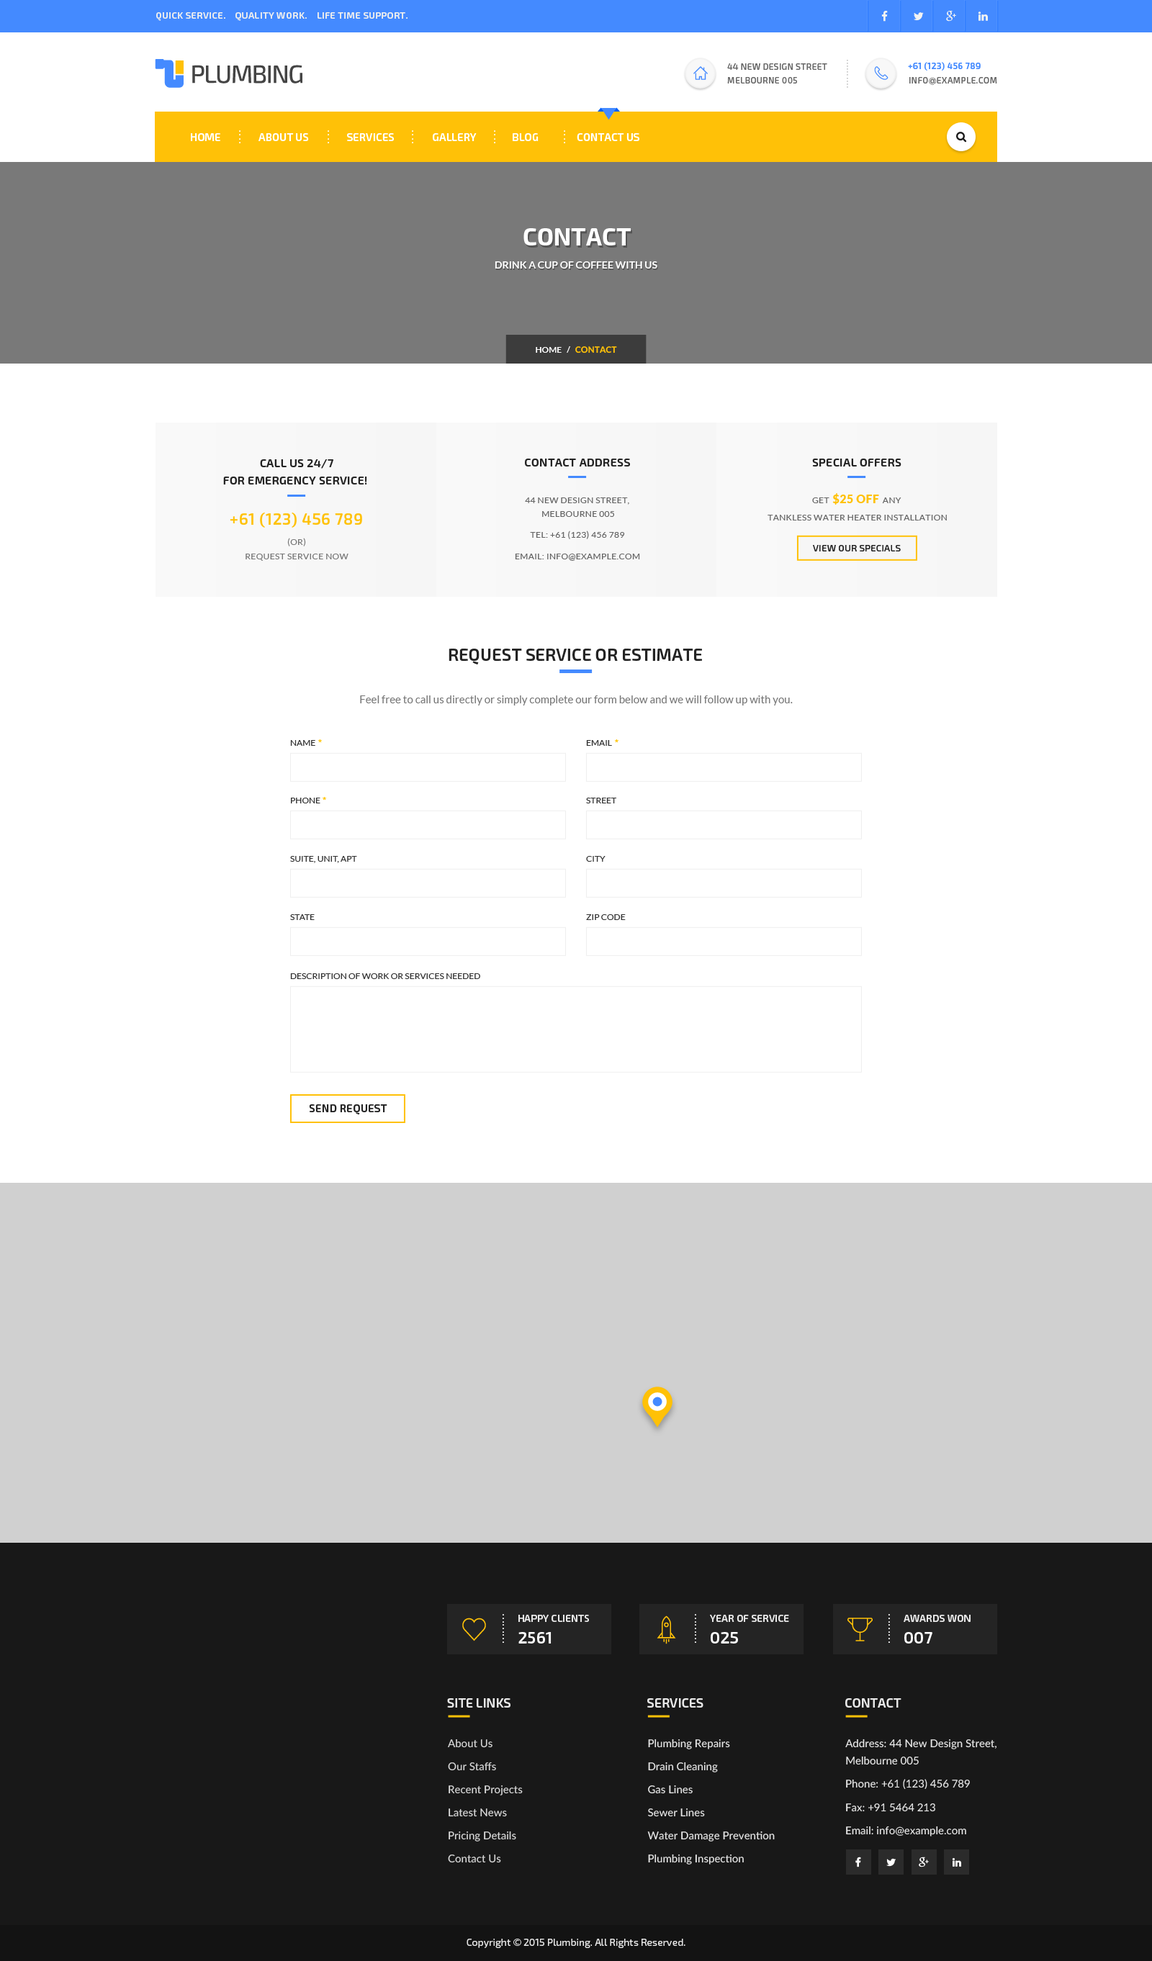
<style>
.page{position:relative;width:1152px;height:1961px;background:#ffffff}
.page>*{position:absolute;margin:0}
.t1{font:9.4px "Exo2.0-SemiBold";letter-spacing:0.03em;color:#eeeeee;text-transform:uppercase}
.t2{font:8.6px/13.7px "Exo2.0-Medium";letter-spacing:0.03em;color:#666666;text-transform:uppercase}
.t3{font:8.6px "Exo2.0-SemiBold";letter-spacing:0.1em;color:#cccccc;text-transform:uppercase}
.t4{font:8.6px "Exo2.0-SemiBold";letter-spacing:0.03em;color:#448aff;text-transform:uppercase}
.t5{font:8.6px "Exo2.0-Medium";letter-spacing:0.03em;color:#666666;text-transform:uppercase}
.t6{font:8.6px "Montserrat-Regular";letter-spacing:0.03em;color:#666666;text-transform:uppercase}
.t7{font:10.8px "Exo2.0-SemiBold";color:#ffffff;text-transform:uppercase}
.t8{font:8.6px "Exo2.0-SemiBold";letter-spacing:0.2em;color:#ffffff;text-transform:uppercase}
.t9{font:24.5px "Exo2.0-Bold";color:#ffffff;text-transform:uppercase}
.t10{font:10.1px "Lato-Bold";color:#ffffff;text-transform:uppercase}
.t11{font:8.6px "Lato-Bold";color:#ffffff;text-transform:uppercase}
.t12{font:8.6px "Lato-Heavy";color:#ffc107;text-transform:uppercase}
.t13{font:11.5px/17.3px "Exo2.0-SemiBold";letter-spacing:0.02em;color:#232323;text-transform:uppercase}
.t14{font:11.5px "Exo2.0-SemiBold";letter-spacing:0.02em;color:#232323;text-transform:uppercase}
.t15{font:8.6px/13.7px "Lato-Regular";letter-spacing:0.03em;color:#666666;text-transform:uppercase}
.t16{font:8.6px/17.3px "Lato-Regular";letter-spacing:0.03em;color:#666666;text-transform:uppercase}
.t17{font:11.5px/17.3px "Lato-Black";letter-spacing:0.03em;color:#ffc107;text-transform:uppercase}
.t18{font:15.8px "Exo2.0-SemiBold";letter-spacing:0.03em;color:#ffc107;text-transform:uppercase}
.t19{font:8.6px "Lato-Regular";letter-spacing:0.03em;color:#666666;text-transform:uppercase}
.t20{font:8.6px "Lato-Regular";letter-spacing:0.03em;color:#777777;text-transform:uppercase}
.t21{font:9.4px "Exo2.0-Medium";letter-spacing:0.02em;color:#232323;text-transform:uppercase}
.t22{font:17.3px "Exo2.0-SemiBold";color:#232323;text-transform:uppercase}
.t23{font:10.8px "Lato-Regular";color:#777777}
.t24{font:8.6px "Lato-Regular";color:#333333;text-transform:uppercase}
.t25{font:8.6px "FiraSans-Regular";color:#ffc300;text-transform:uppercase}
.t26{font:10.8px "Exo2.0-SemiBold";letter-spacing:0.02em;color:#232323;text-transform:uppercase}
.t27{font:8.6px "Exo2.0-SemiBold";letter-spacing:0.15em;color:#ffffff;text-transform:uppercase}
.t28{font:10.1px "Exo2.0-SemiBold";color:#e8e8e8;text-transform:uppercase}
.t29{font:16.6px "Exo2.0-SemiBold";color:#ffffff;text-transform:uppercase}
.t30{font:13px "Exo2.0-SemiBold";color:#e8e8e8;text-transform:uppercase}
.t31{font:10.8px/23px "Lato-Medium";color:#dadada}
.t32{font:10.8px/23px "Lato-Medium";color:#e8e8e8}
.t33{font:10.8px/17.3px "Lato-Medium";color:#e8e8e8}
.t34{font:10.8px "Lato-Medium";color:#e8e8e8}
.t35{font:10.1px "Exo2.0-Regular";color:#e8e8e8}
</style>
<div class="page">
<p class="t1" style="left:156px;top:12px;width:252px;height:9px">Quick Service.    Quality Work.    life time support.</p>
<p class="t2" style="left:727px;top:63px;width:100px;height:21px">44 new design street<br>melbourne 005</p>
<p class="t3" style="left:847px;top:60px;width:1px;height:28px;rotate:90deg">..........</p>
<p class="t4" style="left:908px;top:62px;width:73px;height:9px">+61 (123) 456 789</p>
<p class="t5" style="left:909px;top:77px;width:88px;height:8px">info<span class="t6">@</span>example.com</p>
<p class="t7" style="left:191px;top:133px;width:448px;height:8px">Home                About Us                Services                gALLERY               Blog                Contact us</p>
<p class="t8" style="left:239px;top:130px;width:1px;height:13px;rotate:-90deg">....</p>
<p class="t8" style="left:328px;top:130px;width:1px;height:13px;rotate:-90deg">....</p>
<p class="t8" style="left:412px;top:130px;width:1px;height:13px;rotate:-90deg">....</p>
<p class="t8" style="left:494px;top:130px;width:1px;height:13px;rotate:-90deg">....</p>
<p class="t8" style="left:564px;top:130px;width:1px;height:13px;rotate:-90deg">....</p>
<p class="t9" style="left:523px;top:228px;width:108px;height:18px">contact</p>
<p class="t10" style="left:495px;top:261px;width:162px;height:8px">drink a cup of coffee with us</p>
<p class="t11" style="left:536px;top:346px;width:81px;height:8px">home   /   <span class="t12">contact</span></p>
<p class="t13" style="left:223px;top:459px;width:144px;height:26px;text-align:center">Call us 24/7<br>for emergency service!</p>
<p class="t14" style="left:525px;top:459px;width:105px;height:8px">contact address</p>
<p class="t14" style="left:812px;top:459px;width:89px;height:8px">special offers</p>
<p class="t15" style="left:525px;top:498px;width:104px;height:19px;text-align:center">44 new design street, <br>melbourne 005</p>
<p class="t16" style="left:768px;top:493px;width:179px;height:28px;text-align:center">get <span class="t17">$25 OFF </span>Any <br>Tankless Water Heater Installation</p>
<p class="t18" style="left:230px;top:512px;width:132px;height:16px">+61 (123) 456 789</p>
<p class="t19" style="left:530px;top:531px;width:95px;height:8px">Tel: +61 (123) 456 789</p>
<p class="t20" style="left:287px;top:538px;width:19px;height:8px">(or)</p>
<p class="t21" style="left:813px;top:545px;width:88px;height:7px">view our specials</p>
<p class="t20" style="left:246px;top:554px;width:102px;height:7px">request service now</p>
<p class="t19" style="left:515px;top:554px;width:125px;height:7px">Email: info@example.com</p>
<p class="t22" style="left:449px;top:649px;width:253px;height:16px">Request Service or Estimate</p>
<p class="t23" style="left:360px;top:696px;width:433px;height:10px">Feel free to call us directly or simply complete our form below and we will follow up with you.</p>
<p class="t24" style="left:290px;top:739px;width:32px;height:7px">name <span class="t25">*</span></p>
<p class="t24" style="left:586px;top:739px;width:32px;height:7px">Email <span class="t25">*</span></p>
<p class="t24" style="left:291px;top:797px;width:35px;height:7px">Phone<span class="t25"> *</span></p>
<p class="t24" style="left:586px;top:798px;width:30px;height:6px">street</p>
<p class="t24" style="left:290px;top:856px;width:67px;height:7px">Suite, Unit, Apt</p>
<p class="t24" style="left:586px;top:856px;width:20px;height:6px">City</p>
<p class="t24" style="left:290px;top:914px;width:25px;height:6px">State</p>
<p class="t24" style="left:586px;top:914px;width:40px;height:6px">Zip Code</p>
<p class="t24" style="left:290px;top:973px;width:190px;height:6px">Description of work or services needed</p>
<p class="t26" style="left:309px;top:1104px;width:78px;height:11px">send request</p>
<p class="t27" style="left:503px;top:1614px;width:1px;height:29px;rotate:90deg">.........</p>
<p class="t28" style="left:518px;top:1615px;width:71px;height:7px">happy clients</p>
<p class="t27" style="left:695px;top:1614px;width:1px;height:29px;rotate:90deg">.........</p>
<p class="t28" style="left:710px;top:1615px;width:79px;height:7px">year of service</p>
<p class="t27" style="left:888px;top:1614px;width:2px;height:29px;rotate:90deg">.........</p>
<p class="t28" style="left:904px;top:1615px;width:67px;height:7px">awards won</p>
<p class="t29" style="left:518px;top:1632px;width:34px;height:12px">2561</p>
<p class="t29" style="left:711px;top:1632px;width:27px;height:12px">025</p>
<p class="t29" style="left:904px;top:1632px;width:28px;height:12px">007</p>
<p class="t30" style="left:447px;top:1698px;width:63px;height:10px">site links</p>
<p class="t30" style="left:647px;top:1698px;width:56px;height:10px">services</p>
<p class="t30" style="left:845px;top:1698px;width:56px;height:10px">Contact</p>
<p class="t31" style="left:448px;top:1740px;width:75px;height:123px">About Us<br>Our Staffs     <br>Recent Projects       <br>Latest News         <br>Pricing Details<br>Contact Us</p>
<p class="t32" style="left:647px;top:1739px;width:128px;height:126px">Plumbing Repairs<br>Drain Cleaning<br>Gas Lines<br>Sewer Lines<br>Water Damage Prevention<br>Plumbing Inspection</p>
<p class="t33" style="left:845px;top:1739px;width:151px;height:26px">Address: 44 New Design Street,<br>Melbourne 005</p>
<p class="t34" style="left:846px;top:1779px;width:124px;height:11px">Phone: +61 (123) 456 789</p>
<p class="t34" style="left:846px;top:1804px;width:89px;height:8px">Fax: +91 5464 213</p>
<p class="t34" style="left:846px;top:1826px;width:120px;height:11px">Email: info@example.com</p>
<p class="t35" style="left:467px;top:1939px;width:218px;height:9px">Copyright © 2015 Plumbing. All Rights Reserved.</p>
</div>
